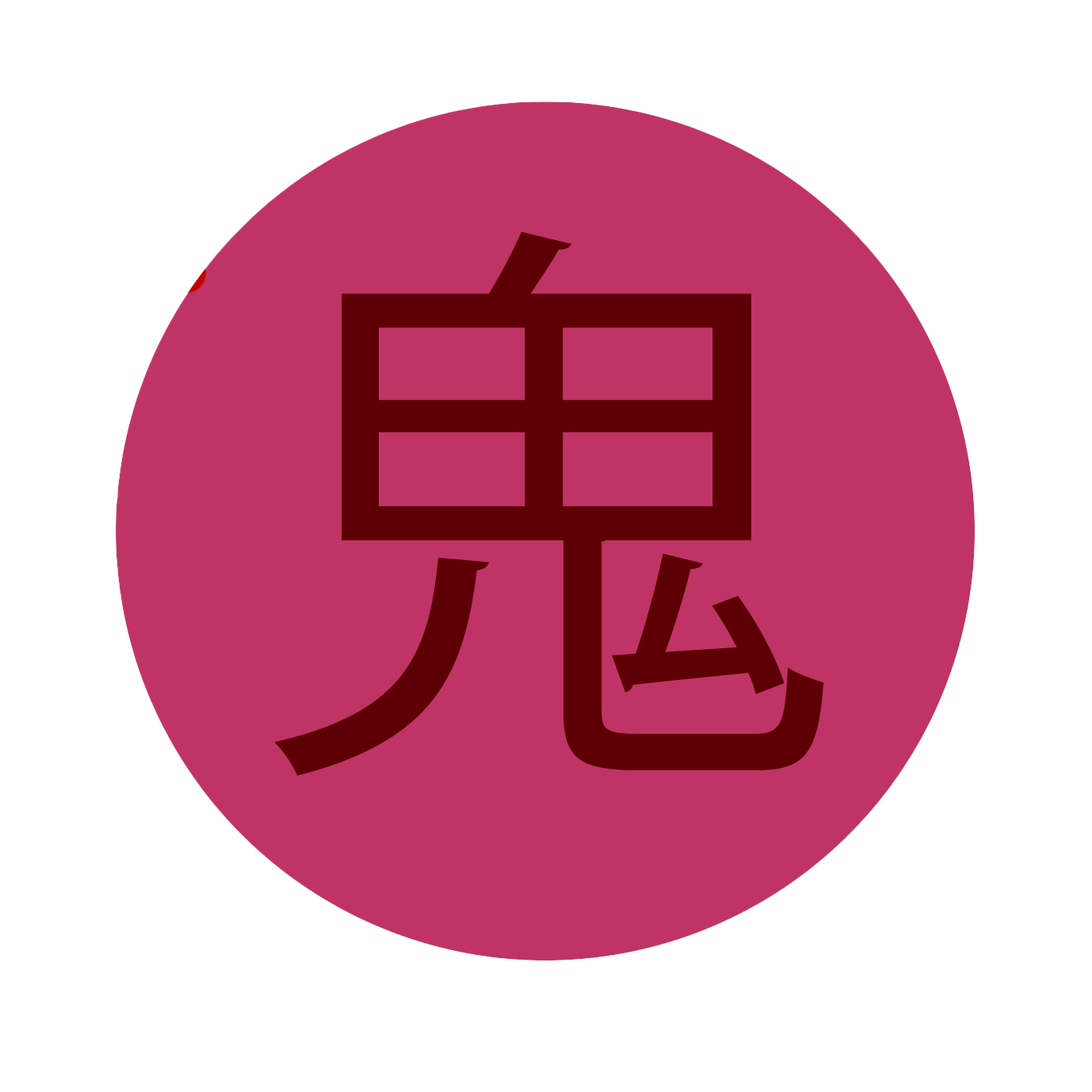
<style>
.page{position:relative;width:1092px;height:1092px;background:#ffffff}
.page>*{position:absolute;margin:0}
.t1{font:577.8px "KozGoPr6N-Regular";color:#5d0004}
</style>
<div class="page">
<p class="t1" style="left:273px;top:231px;width:551px;height:545px">鬼</p>
</div>
